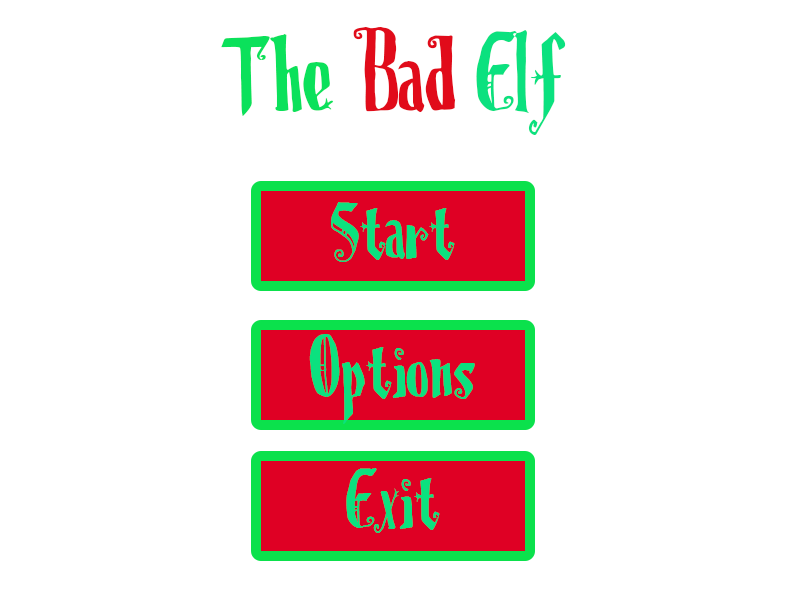
<style>
.page{position:relative;width:800px;height:600px;background:#ffffff}
.page>*{position:absolute;margin:0}
.t1{font:128px "ChristmasOnCrack";color:#0be15b}
.t2{font:128px "ChristmasOnCrack";color:#e10b1a}
.t3{font:128px "ChristmasOnCrack";color:#0be17f}
.t4{font:96px "ChristmasOnCrack";color:#0be17f}
</style>
<div class="page">
<p class="t1" style="left:221px;top:27px;width:345px;height:108px">The <span class="t2">Bad </span><span class="t3">Elf</span></p>
<p class="t4" style="left:331px;top:202px;width:124px;height:60px">Start</p>
<p class="t4" style="left:309px;top:334px;width:166px;height:90px">Options</p>
<p class="t4" style="left:346px;top:468px;width:94px;height:65px">Exit</p>
</div>
